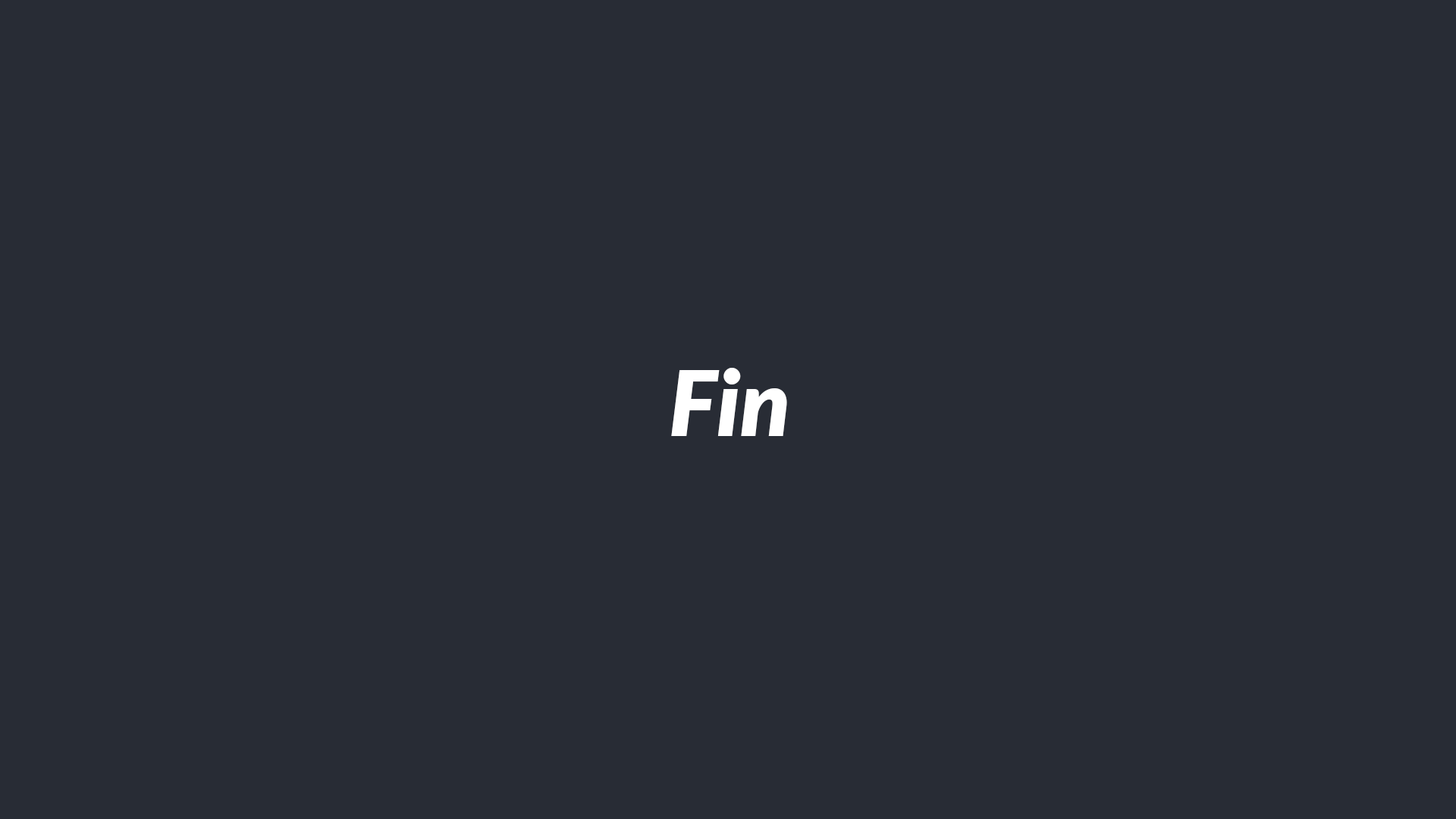
<style>
.page{position:relative;width:1456px;height:819px;background:#282c35}
.page>*{position:absolute;margin:0}
.t1{font:91px "Lato-ExtraBoldItalic";color:#ffffff}
</style>
<div class="page">
<p class="t1" style="left:671px;top:368px;width:116px;height:68px">Fin</p>
</div>
